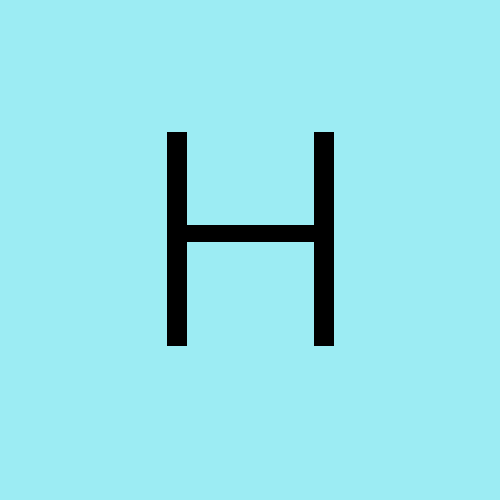
<style>
.page{position:relative;width:500px;height:500px;background:#9cecf3}
.page>*{position:absolute;margin:0}
.t1{font:300px "HelveticaNeue-Light";color:#000000}
</style>
<div class="page">
<p class="t1" style="left:167px;top:132px;width:167px;height:214px">H</p>
</div>
